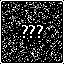
<style>
.page{position:relative;width:64px;height:64px;background:#000000}
.page>*{position:absolute;margin:0}
.t1{font:18px "MyriadPro-Regular";color:#ffffff}
</style>
<div class="page">
<p class="t1" style="left:22px;top:25px;width:21px;height:13px">???</p>
</div>
